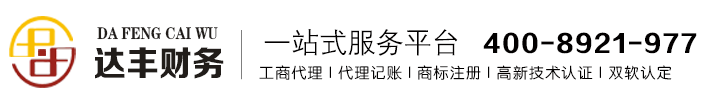
<style>
.page{position:relative;width:705px;height:100px;background:#ffffff}
.page>*{position:absolute;margin:0}
.t1{font:17.1px "FZCSJW--GB1-0";color:#211d1a;scale:0.8 1}
.t2{font:49.2px "·ÂËÎ"}
.t3{font:28.4px "FZZDXJW--GB1-0";color:#020000}
.t4{font:23.6px "FZZDHJW--GB1-0";letter-spacing:0.08em;color:#020000}
.t5{font:34.5px "FZZDHJW--GB1-0";color:#211d1a;scale:0.95 1}
.t6{font:15px "FZY3JW--GB1-0";letter-spacing:0.08em;color:#020000}
</style>
<div class="page">
<p class="t1" style="left:97px;top:27px;width:121px;height:13px">DA FENG CAI WU</p>
<p class="t2" style="left:241px;top:30px;width:1px;height:50px">|</p>
<p class="t3" style="left:264px;top:29px;width:194px;height:27px">一站式服务平台</p>
<p class="t4" style="left:483px;top:32px;width:214px;height:22px">400-8921-977</p>
<p class="t5" style="left:95px;top:47px;width:129px;height:32px">达丰财务</p>
<p class="t6" style="left:259px;top:65px;width:413px;height:15px">工商代理 | 代理记账 | 商标注册 | 高新技术认证 | 双软认定</p>
</div>
